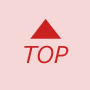
<style>
.page{position:relative;width:90px;height:90px;background:#f6d7d7}
.page>*{position:absolute;margin:0}
.t1{font:40.4px "Meiryo-Italic";color:#ca2121;scale:0.76 1}
.t2{font:23px "Meiryo-Italic";color:#ca2121}
</style>
<div class="page">
<p class="t1" style="left:30px;top:19px;width:32px;height:20px;rotate:-90deg">▶</p>
<p class="t2" style="left:24px;top:45px;width:45px;height:19px">TOP</p>
</div>
